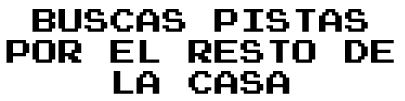
<style>
.page{position:relative;width:405px;height:101px;background:#ffffff}
.page>*{position:absolute;margin:0}
.t1{font:26px "PressStart2P";color:#000000}
</style>
<div class="page">
<p class="t1" style="left:6px;top:9px;width:388px;height:85px;text-align:center">BUSCAS PISTAS<br>POR EL RESTO DE<br>LA CASA</p>
</div>
